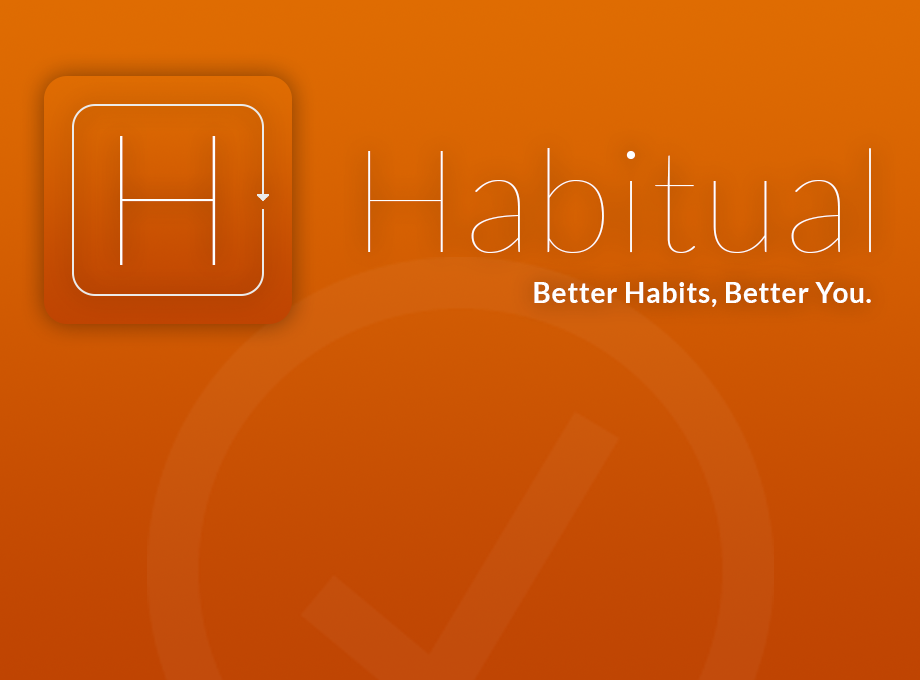
<style>
.page{position:relative;width:920px;height:680px}
.page>*{position:absolute;margin:0}
.t1{font:144px "Lato-Hairline";letter-spacing:0.025em;color:#ffffff}
.t2{font:28px "Lato-Bold";letter-spacing:0.025em;color:#ffffff}
</style>
<div class="page">
<p class="t1" style="left:368px;top:148px;width:503px;height:105px">Habitual</p>
<p class="t2" style="left:534px;top:282px;width:337px;height:25px">Better Habits, Better You.</p>
</div>
